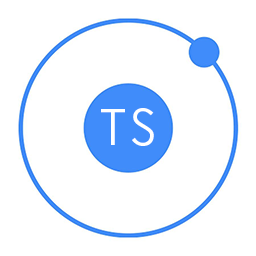
<style>
.page{position:relative;width:256px;height:256px;background:#ffffff}
.page>*{position:absolute;margin:0}
.t1{font:12px "LetterGothicStd-Bold";color:#ffffff}
</style>
<div class="page">
<p class="t1" style="left:101px;top:108px;width:53px;height:38px">TS</p>
</div>
